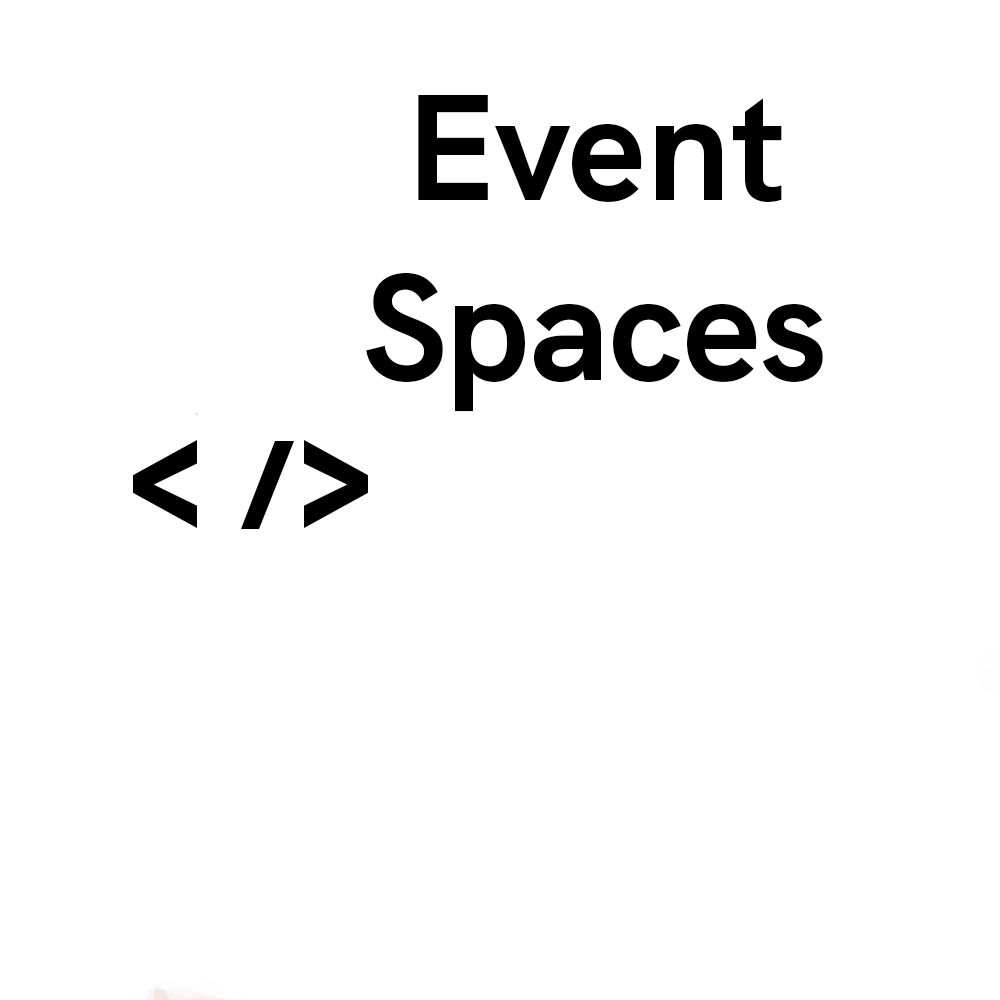
<style>
.page{position:relative;width:1000px;height:1000px;background:#ffffff}
.page>*{position:absolute;margin:0}
.t1{font:150px "HKGrotesk-Bold";color:#000000}
</style>
<div class="page">
<p class="t1" style="left:366px;top:95px;width:457px;height:317px;text-align:center">Event<br>Spaces</p>
</div>
